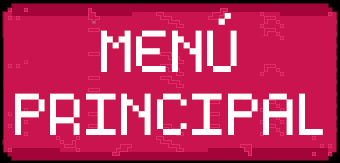
<style>
.page{position:relative;width:340px;height:163px;background:#c91450}
.page>*{position:absolute;margin:0}
.t1{font:94.5px "Essential";color:#fefefe}
</style>
<div class="page">
<p class="t1" style="left:101px;top:13px;width:136px;height:59px">MENÚ</p>
<p class="t1" style="left:15px;top:93px;width:308px;height:42px">PRINCIPAL</p>
</div>
